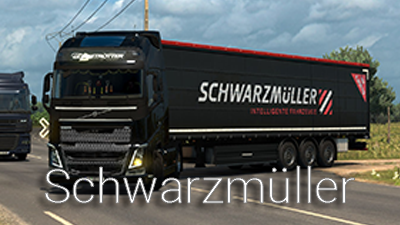
<style>
.page{position:relative;width:400px;height:225px}
.page>*{position:absolute;margin:0}
.t1{font:48px "Roboto-Light"}
</style>
<div class="page">
<p class="t1" style="left:45px;top:166px;width:310px;height:37px">Schwarzmüller</p>
</div>
